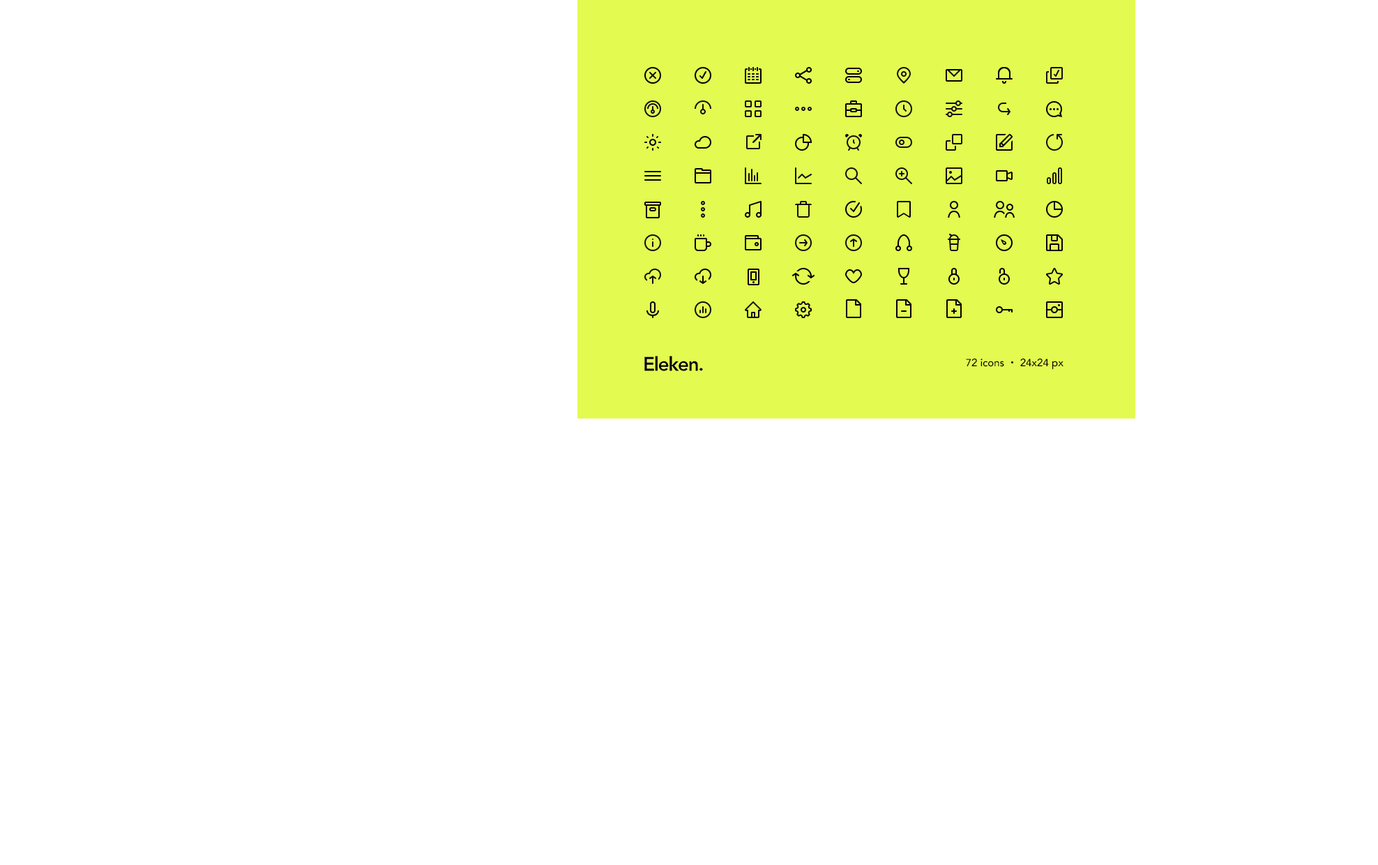
<style>
.page{position:relative;width:1378px;height:865px;background:#ffffff}
.page>*{position:absolute;margin:0}
.t1{font:10.5px "Avenir-Medium";color:#000000}
</style>
<div class="page">
<p class="t1" style="left:966px;top:359px;width:39px;height:8px">72 icons</p>
<p class="t1" style="left:1021px;top:359px;width:43px;height:11px">24x24 px</p>
</div>
